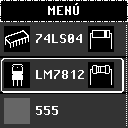
<style>
.page{position:relative;width:128px;height:128px;background:#333333}
.page>*{position:absolute;margin:0}
.t1{font:16px "PixelOperatorHB";color:#ffffff}
</style>
<div class="page">
<p class="t1" style="left:36px;top:34px;width:46px;height:9px">74LS04</p>
<p class="t1" style="left:36px;top:70px;width:48px;height:9px">LM7812</p>
<p class="t1" style="left:36px;top:106px;width:22px;height:9px">555</p>
</div>
